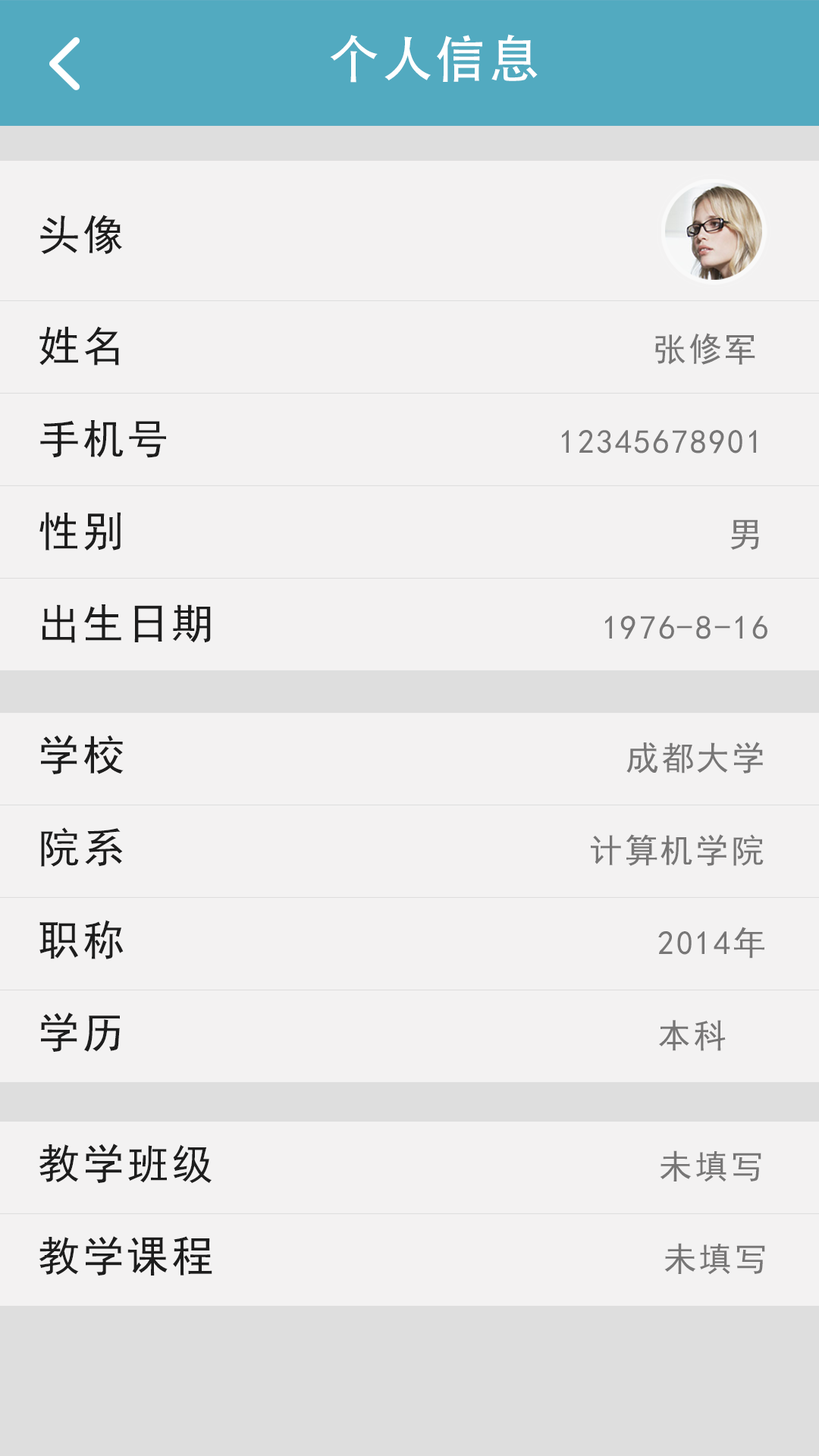
<style>
.page{position:relative;width:819px;height:1456px;background:#f3f2f2}
.page>*{position:absolute;margin:0}
.t1{font:50.8px "AdobeHeitiStd-Regular";letter-spacing:0.06em;color:#ffffff}
.t2{font:41.8px "SimHei";letter-spacing:0.06em;color:#1d1d1d}
.t3{font:33.5px "SimHei";letter-spacing:0.06em;color:#777676}
</style>
<div class="page">
<p class="t1" style="left:330px;top:34px;width:208px;height:49px">个人信息</p>
<p class="t2" style="left:40px;top:215px;width:82px;height:39px">头像</p>
<p class="t2" style="left:39px;top:326px;width:80px;height:40px">姓名</p>
<p class="t3" style="left:655px;top:333px;width:100px;height:32px">张修军</p>
<p class="t2" style="left:40px;top:420px;width:126px;height:38px">手机号</p>
<p class="t3" style="left:562px;top:430px;width:194px;height:23px">12345678901</p>
<p class="t2" style="left:39px;top:512px;width:82px;height:39px">性别</p>
<p class="t3" style="left:730px;top:519px;width:29px;height:31px">男</p>
<p class="t2" style="left:42px;top:604px;width:169px;height:39px">出生日期</p>
<p class="t3" style="left:605px;top:616px;width:162px;height:23px">1976-8-16</p>
<p class="t2" style="left:41px;top:735px;width:83px;height:39px">学校</p>
<p class="t3" style="left:626px;top:742px;width:137px;height:31px">成都大学</p>
<p class="t2" style="left:41px;top:827px;width:82px;height:40px">院系</p>
<p class="t3" style="left:591px;top:834px;width:173px;height:32px">计算机学院</p>
<p class="t2" style="left:39px;top:920px;width:85px;height:39px">职称</p>
<p class="t3" style="left:658px;top:927px;width:106px;height:32px">2014年</p>
<p class="t2" style="left:41px;top:1012px;width:79px;height:40px">学历</p>
<p class="t3" style="left:659px;top:1020px;width:67px;height:31px">本科</p>
<p class="t2" style="left:39px;top:1144px;width:173px;height:39px">教学班级</p>
<p class="t3" style="left:660px;top:1150px;width:101px;height:32px">未填写</p>
<p class="t2" style="left:39px;top:1236px;width:173px;height:39px">教学课程</p>
<p class="t3" style="left:664px;top:1243px;width:101px;height:32px">未填写</p>
</div>
